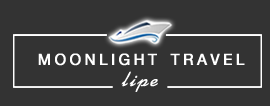
<style>
.page{position:relative;width:270px;height:106px;background:#333333}
.page>*{position:absolute;margin:0}
.t1{font:23.6px "XJS-Saowapark";letter-spacing:0.13em;color:#ffffff;font-weight:bold}
.t2{font:30px "XJS-Toomtam";letter-spacing:0.025em;color:#ffffff;font-style:italic}
</style>
<div class="page">
<p class="t1" style="left:38px;top:53px;width:207px;height:13px">MOONLIGHT TRAVEL</p>
<p class="t2" style="left:121px;top:71px;width:37px;height:21px">lipe</p>
</div>
